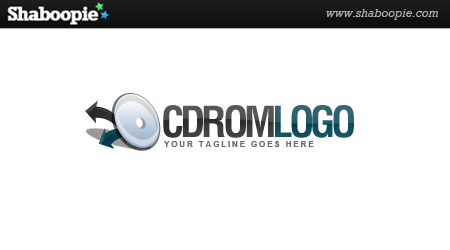
<style>
.page{position:relative;width:450px;height:250px;background:#ffffff}
.page>*{position:absolute;margin:0}
.t1{font:41.7px "Helvetica-Condensed-Bold";letter-spacing:-0.1em}
.t2{font:8.3px "Arial-BoldMT";letter-spacing:0.2em;color:#696969}
</style>
<div class="page">
<p class="t1" style="left:163px;top:105px;width:191px;height:33px">CDROMLOGO</p>
<p class="t2" style="left:164px;top:141px;width:150px;height:6px">YOUR TAGLINE GOES HERE</p>
</div>
